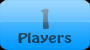
<style>
.page{position:relative;width:90px;height:50px}
.page>*{position:absolute;margin:0}
.t1{font:24px "HoboStd";scale:1.35 1}
.t2{font:12px "HoboStd";color:#18425d;scale:1.35 1}
</style>
<div class="page">
<p class="t1" style="left:40px;top:8px;width:9px;height:21px">1</p>
<p class="t2" style="left:18px;top:32px;width:54px;height:11px">Players</p>
</div>
